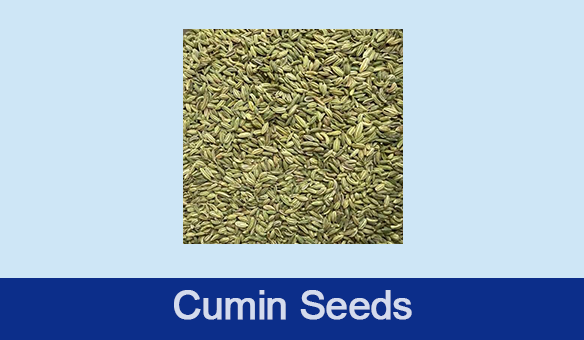
<style>
.page{position:relative;width:584px;height:340px;background:#cee6f6}
.page>*{position:absolute;margin:0}
.t1{font:40.2px "ArialMT";letter-spacing:-0.03em;color:#d4dbed;font-weight:bold}
</style>
<div class="page">
<p class="t1" style="left:174px;top:290px;width:238px;height:30px">Cumin Seeds</p>
</div>
